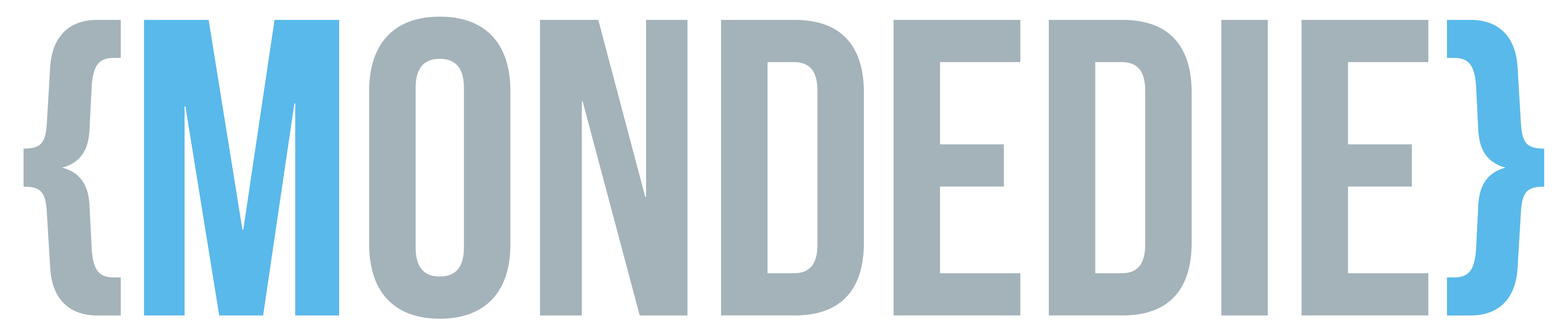
<style>
.page{position:relative;width:1568px;height:335px;background:#ffffff}
.page>*{position:absolute;margin:0}
.t1{font:422.7px "BebasNeue";color:#a4b3ba}
.t2{font:422.7px "BebasNeue";color:#59b9ea}
</style>
<div class="page">
<p class="t1" style="left:23px;top:17px;width:1521px;height:302px">{<span class="t2">M</span>ONDEDIE<span class="t2">}</span></p>
</div>
